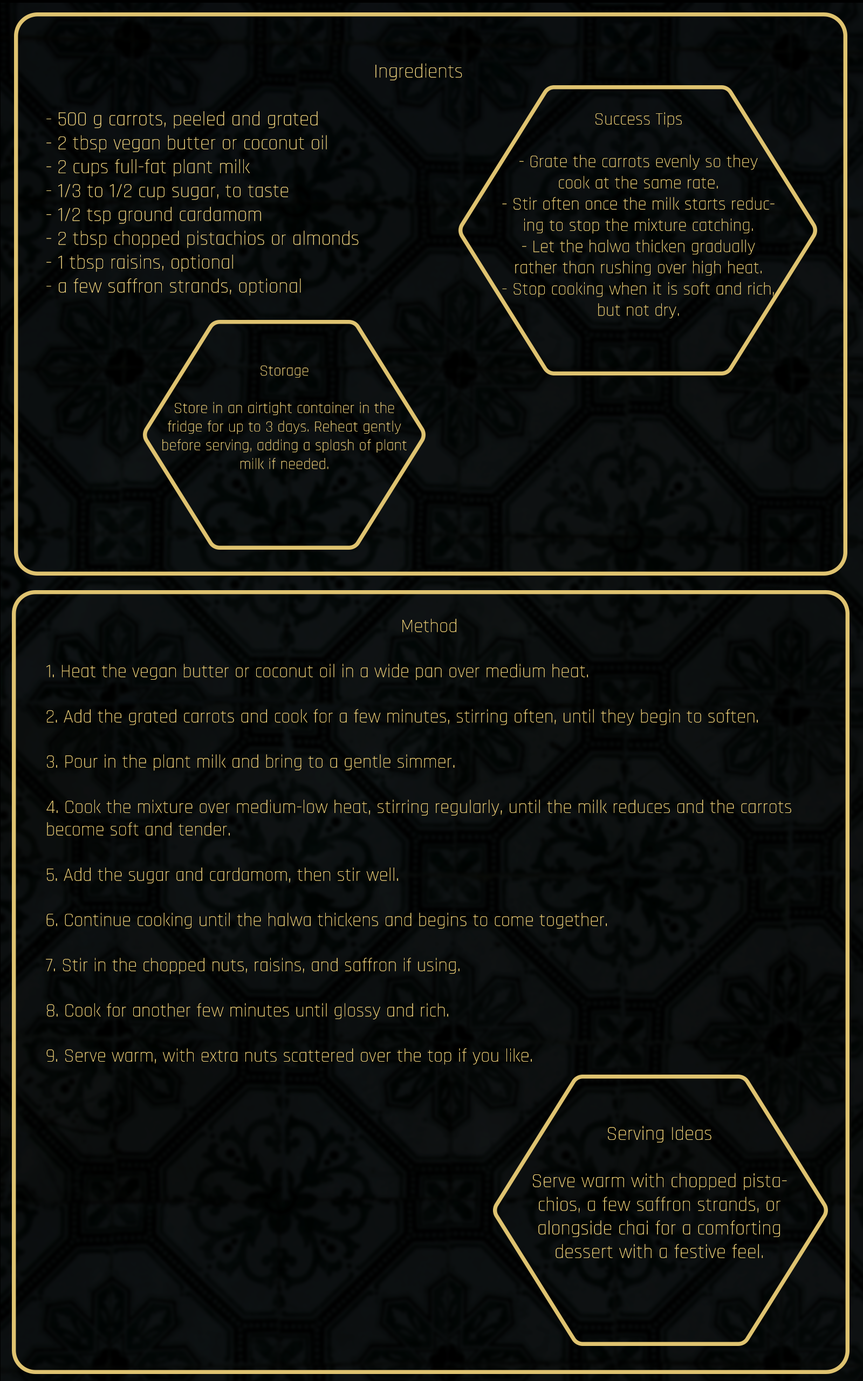
<style>
.page{position:relative;width:863px;height:1381px}
.page>*{position:absolute;margin:0}
.t1{font:19.9px "Rajdhani-Light";color:#ffe187}
.t2{font:17.7px "Rajdhani-Light";color:#ffdf7f}
.t3{font:15.5px "Rajdhani-Light";color:#ffe084}
.t4{font:18.9px "Rajdhani-Light";color:#fede80}
.t5{font:19.7px "Rajdhani-Light";color:#ffdf80}
</style>
<div class="page">
<p class="t1" style="left:46px;top:63px;width:416px;height:233px;text-align:center">Ingredients<br><br>- 500 g carrots, peeled and grated<br>- 2 tbsp vegan butter or coconut oil<br>- 2 cups full-fat plant milk<br>- 1/3 to 1/2 cup sugar, to taste<br>- 1/2 tsp ground cardamom<br>- 2 tbsp chopped pistachios or almonds<br>- 1 tbsp raisins, optional<br>- a few saffron strands, optional</p>
<p class="t2" style="left:502px;top:112px;width:273px;height:206px;text-align:center">Success Tips<br><br>- Grate the carrots evenly so they cook at the same rate.<br>- Stir often once the milk starts reducing to stop the mixture catching.<br>- Let the halwa thicken gradually rather than rushing over high heat.<br>- Stop cooking when it is soft and rich, but not dry.</p>
<p class="t3" style="left:162px;top:365px;width:245px;height:104px;text-align:center">Storage<br><br>Store in an airtight container in the fridge for up to 3 days. Reheat gently before serving, adding a splash of plant milk if needed.</p>
<p class="t4" style="left:46px;top:619px;width:746px;height:446px;text-align:center">Method<br><br>1. Heat the vegan butter or coconut oil in a wide pan over medium heat.<br><br>2. Add the grated carrots and cook for a few minutes, stirring often, until they begin to soften.<br><br>3. Pour in the plant milk and bring to a gentle simmer.<br><br>4. Cook the mixture over medium-low heat, stirring regularly, until the milk reduces and the carrots     become soft and tender.<br><br>5. Add the sugar and cardamom, then stir well.<br><br>6. Continue cooking until the halwa thickens and begins to come together.<br><br>7. Stir in the chopped nuts, raisins, and saffron if using.<br><br>8. Cook for another few minutes until glossy and rich.<br><br>9. Serve warm, with extra nuts scattered over the top if you like.</p>
<p class="t5" style="left:533px;top:1126px;width:254px;height:132px;text-align:center">Serving Ideas<br><br>Serve warm with chopped pistachios, a few saffron strands, or alongside chai for a comforting dessert with a festive feel.</p>
</div>
